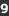
<style>
.page{position:relative;width:9px;height:16px;background:#333333}
.page>*{position:absolute;margin:0}
.t1{font:12.5px "RoundedMplus1c-ExtraBold";color:#ffffff}
</style>
<div class="page">
<p class="t1" style="left:0px;top:3px;width:8px;height:11px">9</p>
</div>
